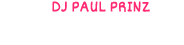
<style>
.page{position:relative;width:184px;height:45px;background:#ffffff}
.page>*{position:absolute;margin:0}
.t1{font:16.4px "Dekko";color:#ff2a70;font-weight:bold}
</style>
<div class="page">
<p class="t1" style="left:52px;top:1px;width:98px;height:11px">DJ PAUL PRINZ</p>
</div>
